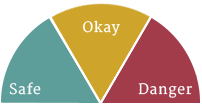
<style>
.page{position:relative;width:202px;height:109px;background:#ffffff}
.page>*{position:absolute;margin:0}
.t1{font:14px "Merriweather";letter-spacing:0.05em;color:#ffffff}
</style>
<div class="page">
<p class="t1" style="left:82px;top:20px;width:38px;height:16px">Okay</p>
<p class="t1" style="left:9px;top:82px;width:32px;height:13px">Safe</p>
<p class="t1" style="left:138px;top:83px;width:54px;height:15px">Danger</p>
</div>
